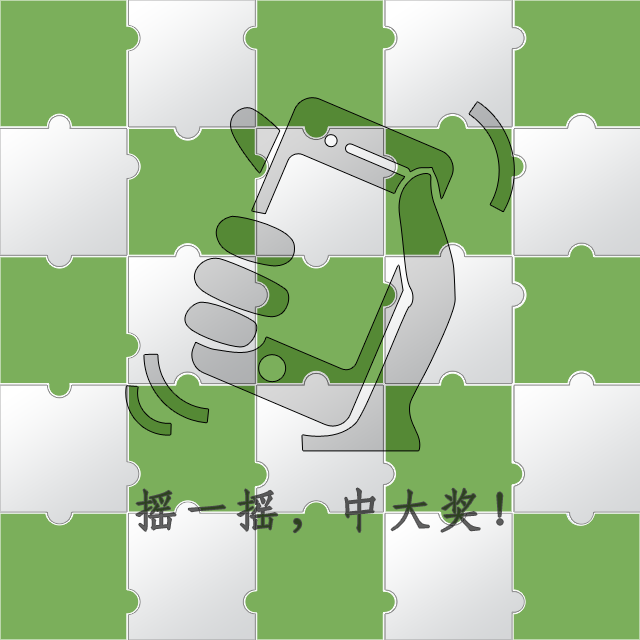
<style>
.page{position:relative;width:640px;height:640px;background:#7baf5b}
.page>*{position:absolute;margin:0}
.t1{font:45px "STFangsong";letter-spacing:0.1em;font-weight:bold}
</style>
<div class="page">
<p class="t1" style="left:136px;top:488px;width:367px;height:45px">摇一摇，中大奖！</p>
</div>
